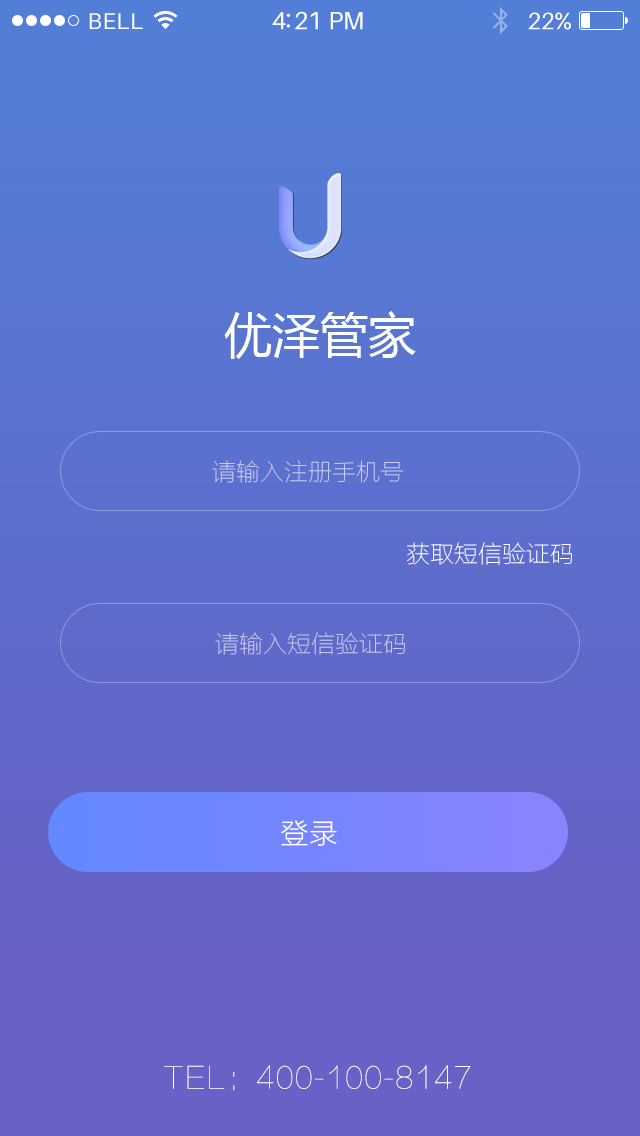
<style>
.page{position:relative;width:640px;height:1136px}
.page>*{position:absolute;margin:0}
.t1{font:48px "MicrosoftYaHei";color:#ffffff}
.t2{font:24px "FZLTCXHJW--GB1-0";color:#c8cded}
.t3{font:24px "FZLTCXHJW--GB1-0";color:#ffffff}
.t4{font:24px "FZLTCXHJW--GB1-0";color:#c9cceb}
.t5{font:28px "STHeitiSC-Light";color:#ffffff}
.t6{font:30px "FZLTCXHJW--GB1-0";color:#ffffff}
</style>
<div class="page">
<p class="t1" style="left:224px;top:311px;width:192px;height:48px">优泽管家</p>
<p class="t2" style="left:212px;top:460px;width:192px;height:23px">请输入注册手机号</p>
<p class="t3" style="left:407px;top:542px;width:165px;height:23px">获取短信验证码</p>
<p class="t4" style="left:215px;top:632px;width:190px;height:23px">请输入短信验证码</p>
<p class="t5" style="left:281px;top:820px;width:56px;height:26px">登录</p>
<p class="t6" style="left:164px;top:1065px;width:307px;height:26px">TEL：400-100-8147</p>
</div>
